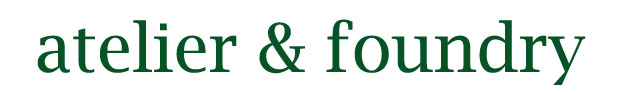
<style>
.page{position:relative;width:624px;height:92px;background:#ffffff}
.page>*{position:absolute;margin:0}
.t1{font:66.7px "LucidaBright";color:#075326}
</style>
<div class="page">
<p class="t1" style="left:37px;top:19px;width:549px;height:66px">atelier &amp; foundry</p>
</div>
